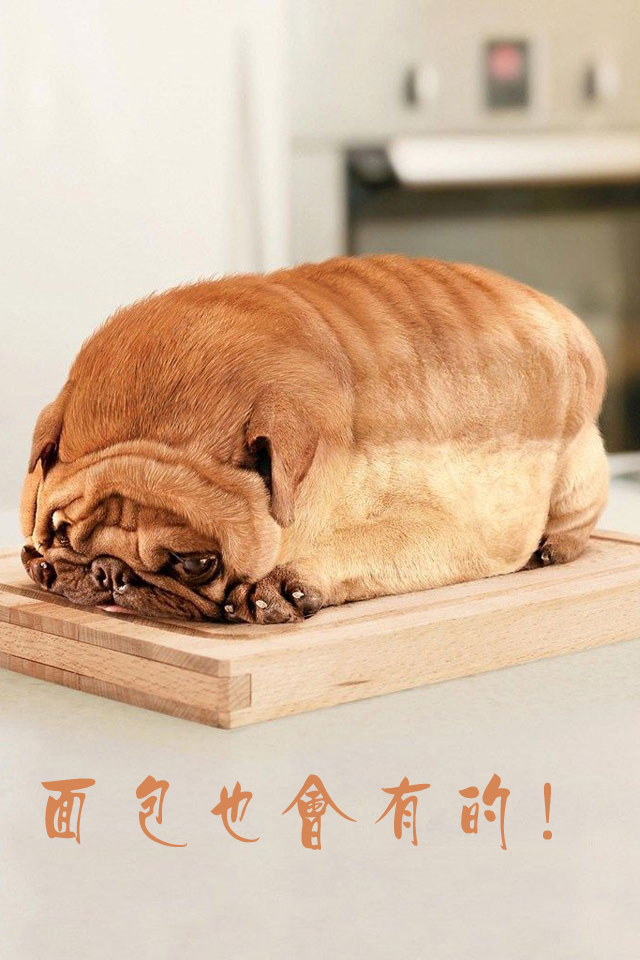
<style>
.page{position:relative;width:640px;height:960px}
.page>*{position:absolute;margin:0}
.t1{font:83.3px "¾­µä·±ÖÐ±ä Regular";color:#d68555}
</style>
<div class="page">
<p class="t1" style="left:41px;top:773px;width:511px;height:77px">面包也会有的!</p>
</div>
